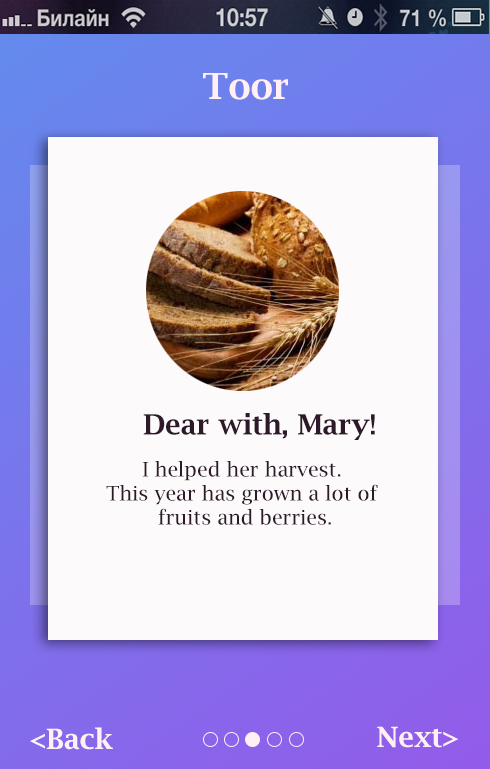
<style>
.page{position:relative;width:490px;height:769px;background:#fcfafa}
.page>*{position:absolute;margin:0}
.t1{font:36px "LucidaBright-Demi";color:#fff0f5}
.t2{font:28px "LucidaBright-Demi";color:#2e192a}
.t3{font:20px "LucidaBright";color:#2e192a}
.t4{font:28px "LucidaBright-Demi";color:#fff0f5}
</style>
<div class="page">
<p class="t1" style="left:203px;top:73px;width:85px;height:27px">Toor</p>
<p class="t2" style="left:143px;top:413px;width:232px;height:27px">Dear with, Mary!</p>
<p class="t3" style="left:106px;top:461px;width:272px;height:64px;text-align:center">I helped her harvest. <br>This year has grown a lot of <br>fruits and berries.</p>
<p class="t4" style="left:377px;top:726px;width:82px;height:22px">Next&gt;</p>
<p class="t4" style="left:30px;top:727px;width:83px;height:23px">&lt;Back</p>
</div>
